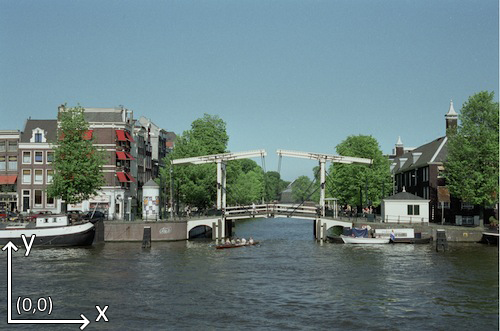
<style>
.page{position:relative;width:500px;height:331px}
.page>*{position:absolute;margin:0}
.t1{font:31.9px "Calibri";color:#ffffff}
.t2{font:19.8px "Calibri";color:#ffffff}
</style>
<div class="page">
<p class="t1" style="left:21px;top:235px;width:14px;height:21px">y</p>
<p class="t2" style="left:17px;top:297px;width:35px;height:17px">(0,0)</p>
<p class="t1" style="left:95px;top:306px;width:14px;height:15px">x</p>
</div>
